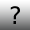
<style>
.page{position:relative;width:30px;height:30px}
.page>*{position:absolute;margin:0}
.t1{font:24px "DejaVuSans";color:#000000}
</style>
<div class="page">
<p class="t1" style="left:10px;top:6px;width:11px;height:18px">?</p>
</div>
